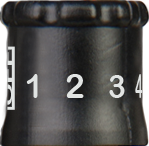
<style>
.page{position:relative;width:149px;height:146px}
.page>*{position:absolute;margin:0}
.t1{font:11.8px "ArialRoundedMTBold";letter-spacing:-0.01em;scale:2.44 1}
.t2{font:32.5px "ArialRoundedMTBold";letter-spacing:-0.01em;color:#e1e4e3;scale:0.93 1}
.t3{font:33.3px "ArialRoundedMTBold";letter-spacing:-0.01em;color:#e1e4e3}
.t4{font:32.5px "ArialRoundedMTBold";letter-spacing:-0.01em;color:#e1e4e3;scale:0.36 1}
</style>
<div class="page">
<p class="t1" style="left:3px;top:50px;width:10px;height:55px;rotate:-90deg">OFF</p>
<p class="t2" style="left:26px;top:74px;width:12px;height:24px">1</p>
<p class="t3" style="left:66px;top:74px;width:18px;height:24px">2</p>
<p class="t2" style="left:109px;top:75px;width:16px;height:23px">3</p>
<p class="t4" style="left:135px;top:74px;width:8px;height:24px">4</p>
</div>
